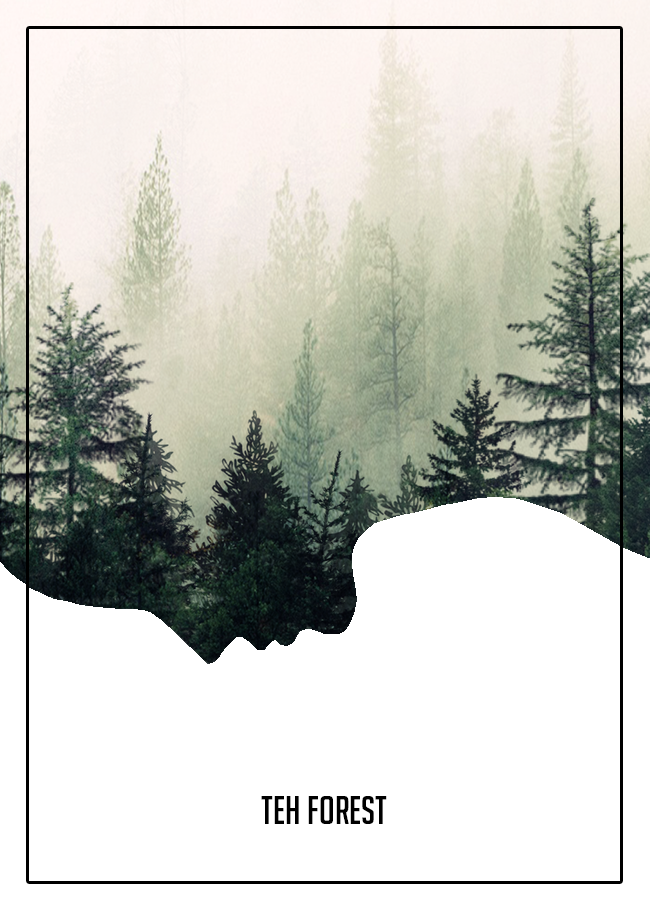
<style>
.page{position:relative;width:650px;height:910px;background:#ffffff}
.page>*{position:absolute;margin:0}
.t1{font:39px "BigNoodleTitling";color:#000000}
</style>
<div class="page">
<p class="t1" style="left:261px;top:796px;width:126px;height:28px">teh forest</p>
</div>
